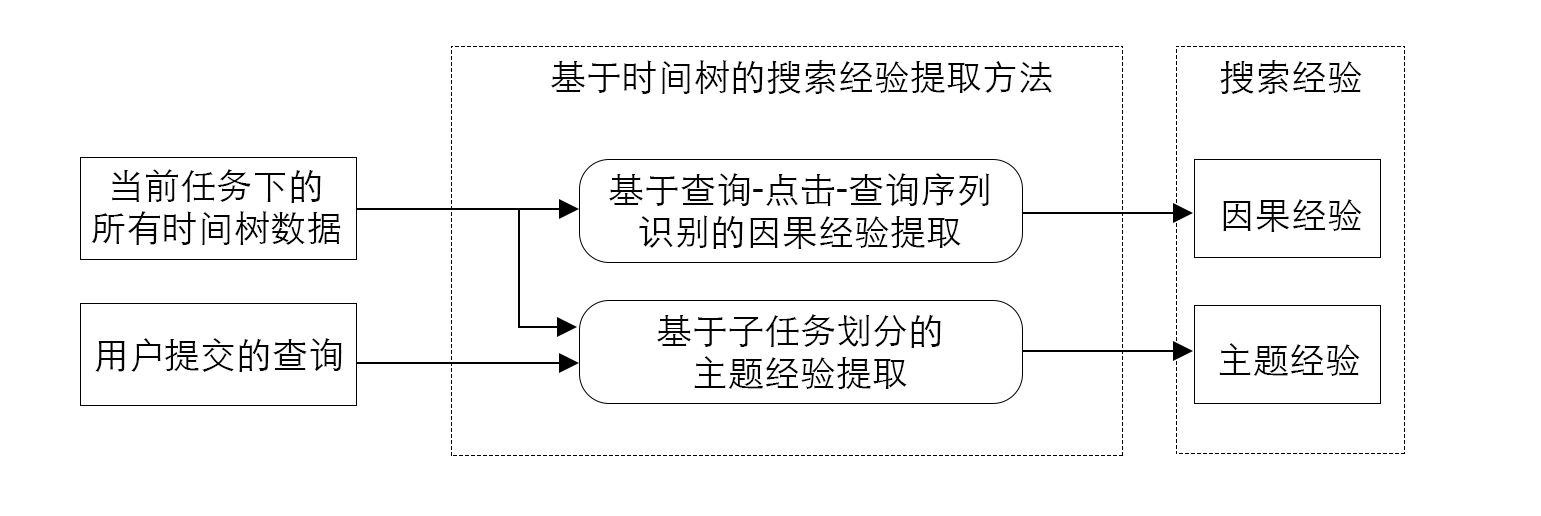
<style>
.page{position:relative;width:1541px;height:516px;background:#ffffff}
.page>*{position:absolute;margin:0}
.t1{font:36px "STHeitiSC-Light";color:#030303}
</style>
<div class="page">
<p class="t1" style="left:551px;top:60px;width:501px;height:34px">基于时间树的搜索经验提取方法</p>
<p class="t1" style="left:1220px;top:60px;width:142px;height:34px">搜索经验</p>
<p class="t1" style="left:91px;top:169px;width:250px;height:76px;text-align:center">当前任务下的<br>所有时间树数据</p>
<p class="t1" style="left:609px;top:173px;width:381px;height:76px;text-align:center">基于查询-点击-查询序列<br>识别的因果经验提取</p>
<p class="t1" style="left:1223px;top:199px;width:139px;height:33px">因果经验</p>
<p class="t1" style="left:657px;top:314px;width:284px;height:75px;text-align:center">基于子任务划分的<br>主题经验提取</p>
<p class="t1" style="left:95px;top:338px;width:247px;height:34px">用户提交的查询</p>
<p class="t1" style="left:1219px;top:343px;width:141px;height:33px">主题经验</p>
</div>
